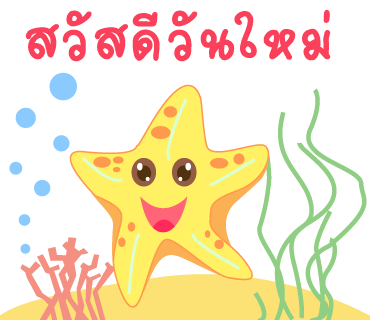
<style>
.page{position:relative;width:370px;height:320px;background:#ffffff}
.page>*{position:absolute;margin:0}
.t1{font:85px "2005_iannnnnMTV";letter-spacing:0.025em;color:#fa405a;scale:1.06 1}
</style>
<div class="page">
<p class="t1" style="left:25px;top:9px;width:306px;height:53px">สวัสดีวันใหม่</p>
</div>
